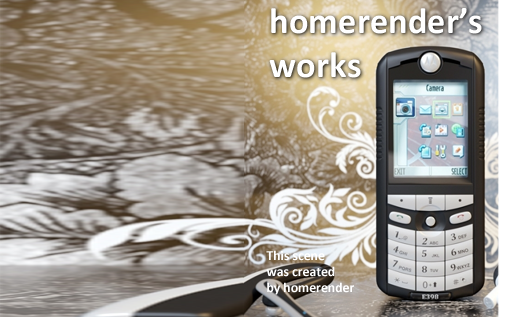
<style>
.page{position:relative;width:512px;height:317px}
.page>*{position:absolute;margin:0}
.t1{font:36.6px "Calibri-Bold";color:#ffffff}
.t2{font:13.7px "Calibri-Bold";color:#ffffff}
</style>
<div class="page">
<p class="t1" style="left:269px;top:8px;width:213px;height:70px">homerender’s<br>works</p>
<p class="t2" style="left:266px;top:250px;width:88px;height:45px">This scene<br>was created<br>by homerender</p>
</div>
